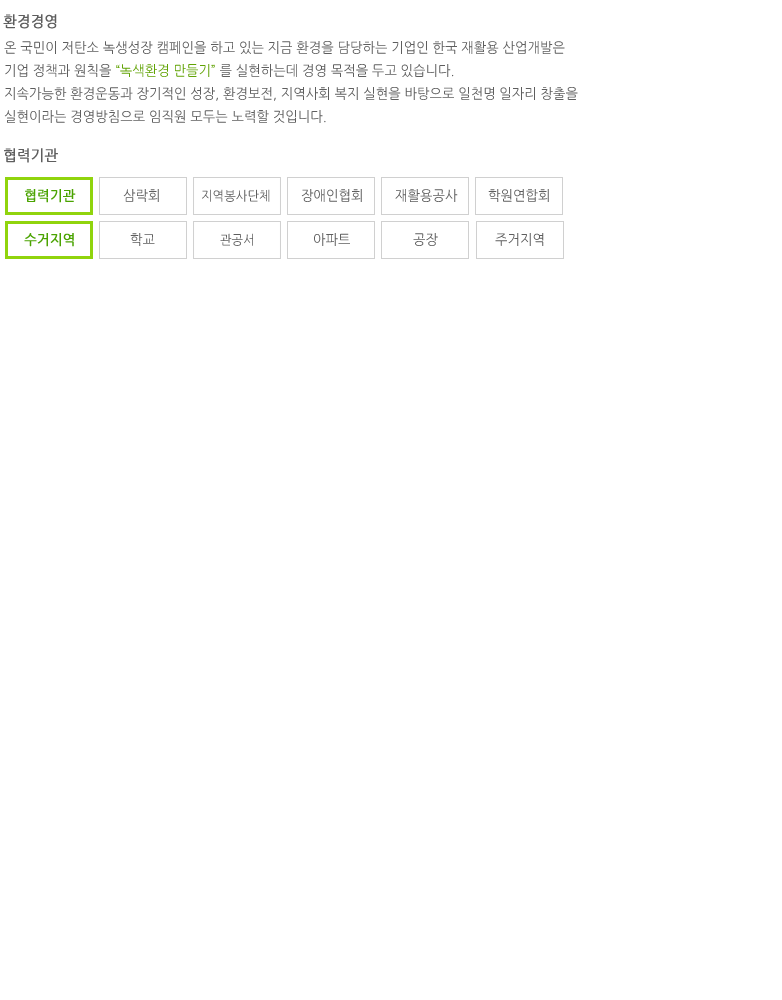
<style>
.page{position:relative;width:782px;height:1000px;background:#ffffff}
.page>*{position:absolute;margin:0}
.t1{font:15px "NanumGothic";color:#5e5e5e;font-weight:bold;scale:0.95 1}
.t2{font:14px/23px "NanumGothic";color:#5e5e5e;scale:0.95 1}
.t3{font:14px/23px "NanumGothic";color:#60a203;scale:0.95 1}
.t4{font:14px "NanumGothic";color:#4aa301;font-weight:bold;scale:0.95 1}
.t5{font:14px "NanumGothic";color:#5e5e5e;scale:0.95 1}
.t6{font:13px "NanumGothic";color:#5e5e5e;scale:0.95 1}
</style>
<div class="page">
<p class="t1" style="left:3px;top:14px;width:54px;height:15px">환경경영</p>
<p class="t2" style="left:4px;top:41px;width:574px;height:82px">온 국민이 저탄소 녹생성장 캠페인을 하고 있는 지금 환경을 담당하는 기업인 한국 재활용 산업개발은 <br>기업 정책과 원칙을 <span class="t3">“녹색환경 만들기”</span> 를 실현하는데 경영 목적을 두고 있습니다.<br>지속가능한 환경운동과 장기적인 성장, 환경보전, 지역사회 복지 실현을 바탕으로 일천명 일자리 창출을 <br>실현이라는 경영방침으로 임직원 모두는 노력할 것입니다.</p>
<p class="t1" style="left:4px;top:148px;width:54px;height:15px">협력기관</p>
<p class="t4" style="left:25px;top:189px;width:51px;height:14px">협력기관</p>
<p class="t5" style="left:123px;top:189px;width:36px;height:13px">삼락회</p>
<p class="t6" style="left:202px;top:189px;width:68px;height:13px">지역봉사단체</p>
<p class="t5" style="left:301px;top:189px;width:61px;height:13px">장애인협회</p>
<p class="t5" style="left:395px;top:189px;width:63px;height:13px">재활용공사</p>
<p class="t5" style="left:488px;top:189px;width:61px;height:13px">학원연합회</p>
<p class="t4" style="left:24px;top:233px;width:50px;height:14px">수거지역</p>
<p class="t5" style="left:130px;top:233px;width:25px;height:13px">학교</p>
<p class="t6" style="left:220px;top:233px;width:33px;height:13px">관공서</p>
<p class="t5" style="left:314px;top:233px;width:36px;height:13px">아파트</p>
<p class="t5" style="left:413px;top:233px;width:25px;height:13px">공장</p>
<p class="t5" style="left:495px;top:233px;width:49px;height:13px">주거지역</p>
</div>
